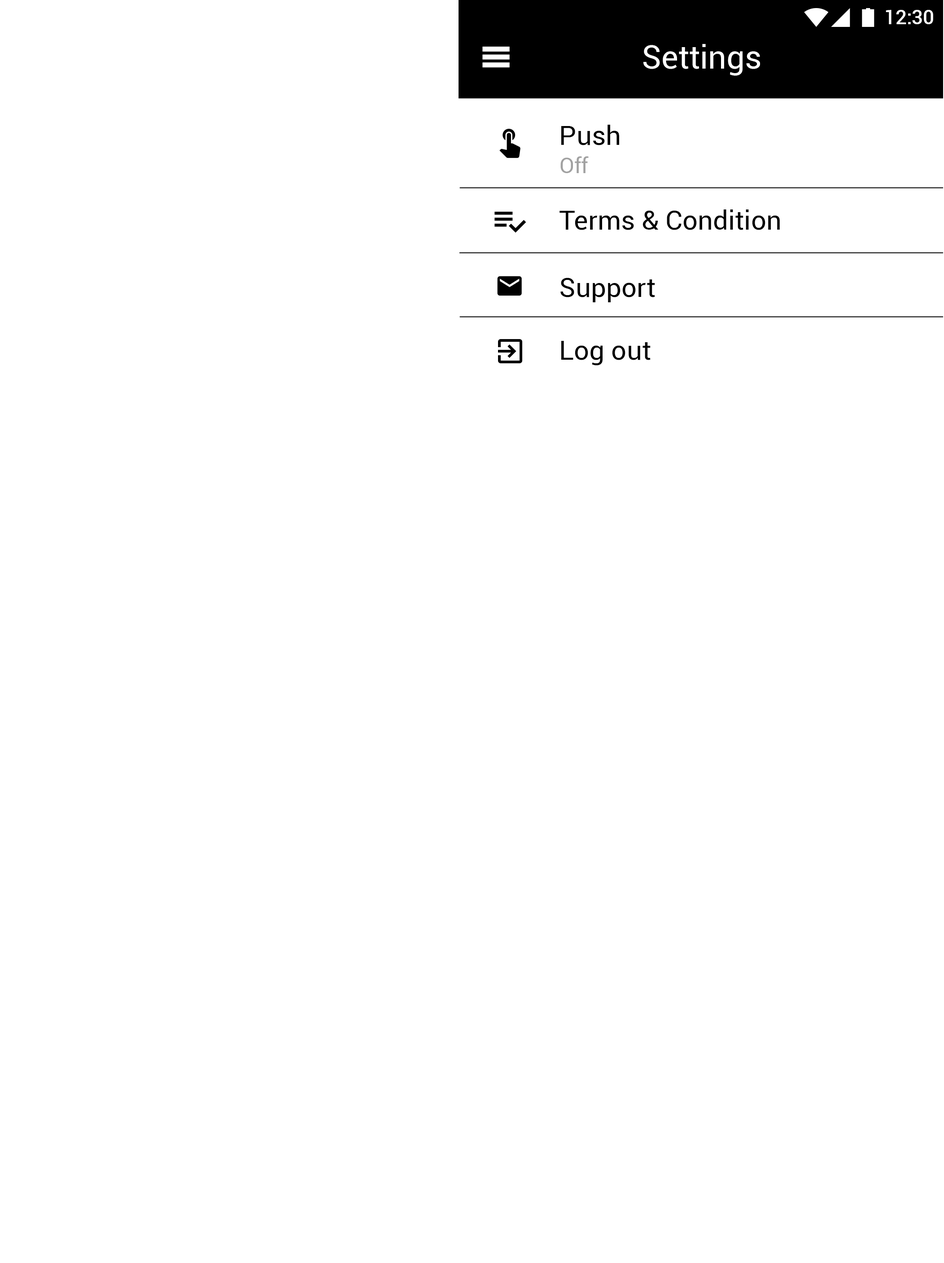
<style>
.page{position:relative;width:944px;height:1263px;background:#ffffff}
.page>*{position:absolute;margin:0}
.t1{font:19.7px "Roboto-Medium";color:#ffffff}
.t2{font:32.3px "Roboto-Regular";color:#ffffff}
.t3{font:26.9px "Roboto-Regular";color:#000000}
.t4{font:21.5px "Roboto-Regular";color:#a1a1a1}
</style>
<div class="page">
<p class="t1" style="left:886px;top:10px;width:47px;height:14px">12:30</p>
<p class="t2" style="left:643px;top:44px;width:117px;height:32px">Settings</p>
<p class="t3" style="left:561px;top:125px;width:58px;height:20px">Push</p>
<p class="t4" style="left:560px;top:156px;width:29px;height:17px">Off</p>
<p class="t3" style="left:559px;top:210px;width:221px;height:20px">Terms &amp; Condition</p>
<p class="t3" style="left:560px;top:278px;width:95px;height:24px">Support</p>
<p class="t3" style="left:561px;top:341px;width:89px;height:25px">Log out</p>
</div>
